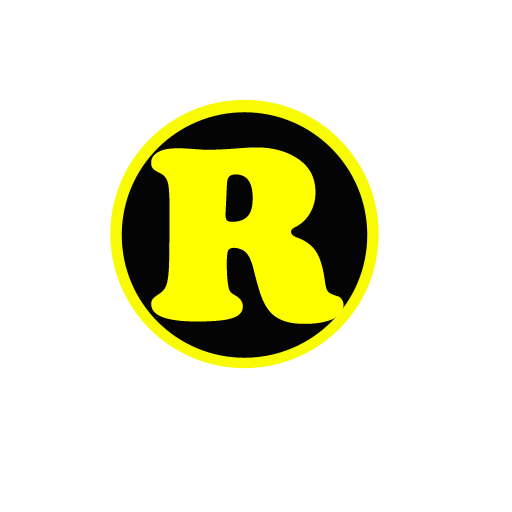
<style>
.page{position:relative;width:512px;height:512px;background:#ffffff}
.page>*{position:absolute;margin:0}
.t1{font:254px "CooperBlack";color:#ffff00}
</style>
<div class="page">
<p class="t1" style="left:151px;top:147px;width:193px;height:177px">R</p>
</div>
